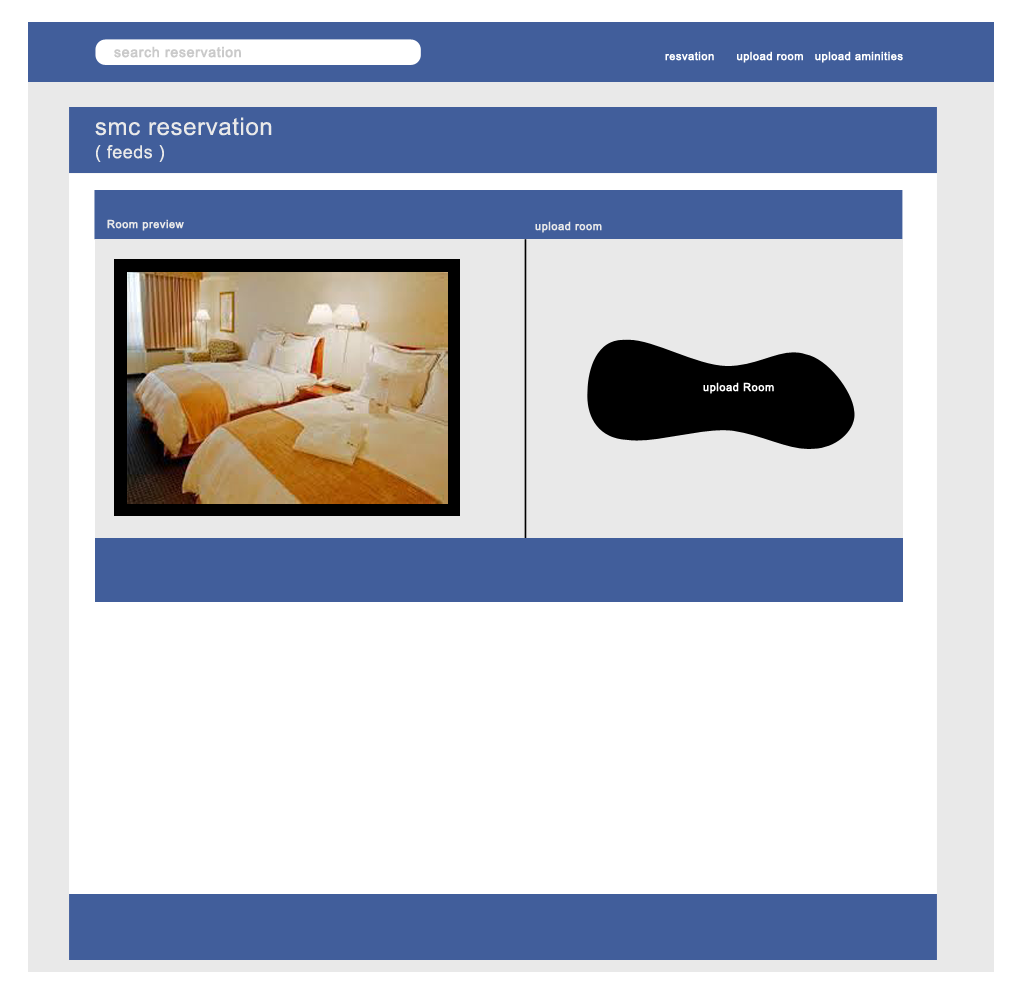
<style>
.page{position:relative;width:1024px;height:1000px;background:#ffffff}
.page>*{position:absolute;margin:0}
.t1{font:14px "ArialMT";letter-spacing:0.025em;color:#cacaca;font-weight:bold}
.t2{font:11px "ArialMT";letter-spacing:0.025em;color:#ffffff;font-weight:bold}
.t3{font:24px/11.6px "ArialMT";letter-spacing:0.025em;color:#e9e9e9}
.t4{font:18px/11.6px "ArialMT";letter-spacing:0.025em;color:#e9e9e9}
.t5{font:11px "ArialMT";letter-spacing:0.025em;color:#e9e9e9;font-weight:bold}
</style>
<div class="page">
<p class="t1" style="left:114px;top:46px;width:127px;height:12px">search reservation</p>
<p class="t2" style="left:665px;top:51px;width:238px;height:12px">resvation      upload room   upload aminities</p>
<p class="t3" style="left:95px;top:117px;width:177px;height:45px">smc reservation <br><br><span class="t4">( feeds )</span></p>
<p class="t5" style="left:107px;top:219px;width:77px;height:12px">Room preview</p>
<p class="t5" style="left:535px;top:221px;width:67px;height:12px">upload room</p>
<p class="t2" style="left:703px;top:382px;width:71px;height:12px">upload Room</p>
</div>
